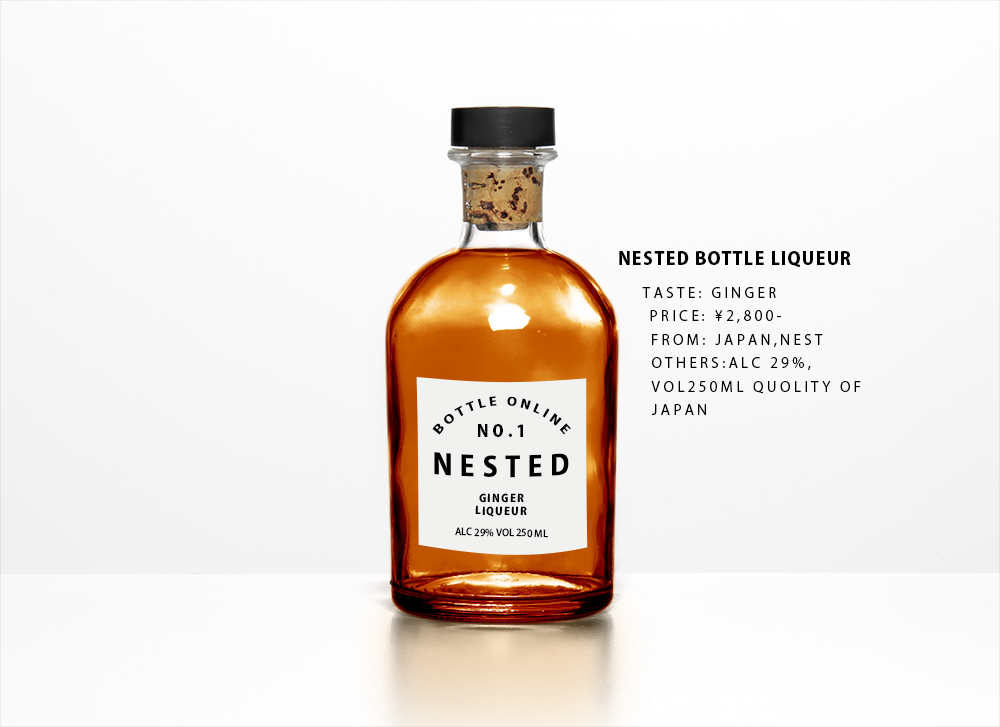
<style>
.page{position:relative;width:1000px;height:727px}
.page>*{position:absolute;margin:0}
.t1{font:14px/23.5px "KozGoPr6N-Regular";letter-spacing:0.24em;color:#000000}
.t2{font:18px "KozGoPr6N-Heavy";letter-spacing:0.06em;color:#000000}
.t3{font:11.5px "KozGoPr6N-Heavy";letter-spacing:0.24em;color:#000000;text-transform:uppercase}
.t4{font:16.2px "KozGoPr6N-Heavy";letter-spacing:0.24em;color:#000000;text-transform:uppercase}
.t5{font:28.5px "KozGoPr6N-Heavy";letter-spacing:0.24em;color:#000000;text-transform:uppercase}
.t6{font:10.8px "KozGoPr6N-Heavy";letter-spacing:0.12em;color:#000000;text-transform:uppercase}
.t7{font:9.6px "KozGoPr6N-Medium";color:#000000;text-transform:uppercase}
</style>
<div class="page">
<p class="t1" style="left:619px;top:251px;width:242px;height:164px"><span class="t2">NESTED BOTTLE LIQUEUR<br></span>TASTE: GINGER<br>PRICE: ¥2,800-<br>FROM: JAPAN,NEST<br>OTHERS:ALC 29%, VOL250ML QUOLITY OF JAPAN</p>
<p class="t3" style="left:432px;top:396px;width:139px;height:39px;rotate:1deg">bottle online</p>
<p class="t4" style="left:478px;top:424px;width:45px;height:13px">No.1</p>
<p class="t5" style="left:434px;top:452px;width:135px;height:26px">NESTED</p>
<p class="t6" style="left:475px;top:493px;width:52px;height:24px;text-align:center;rotate:1deg">GINGER<br>LIQUEUR</p>
<p class="t7" style="left:455px;top:527px;width:93px;height:11px;rotate:1deg">ALC 29% Vol 250 ml</p>
</div>
